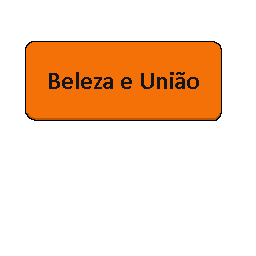
<style>
.page{position:relative;width:256px;height:256px;background:#ffffff}
.page>*{position:absolute;margin:0}
.t1{font:25px "Calibri-Bold";color:#141619}
</style>
<div class="page">
<p class="t1" style="left:49px;top:72px;width:150px;height:17px">Beleza e União</p>
</div>
